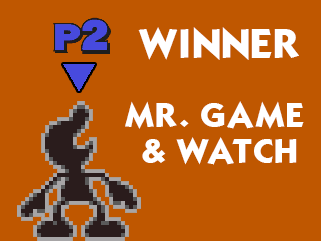
<style>
.page{position:relative;width:321px;height:241px;background:#bf5700}
.page>*{position:absolute;margin:0}
.t1{font:36px "KabelBd-Normal";color:#ffffff}
.t2{font:30px "KabelBd-Normal";color:#ffffff}
</style>
<div class="page">
<p class="t1" style="left:138px;top:27px;width:161px;height:33px">WINNER</p>
<p class="t2" style="left:125px;top:101px;width:179px;height:64px;text-align:center">MR. GAME<br> &amp; WATCH</p>
</div>
